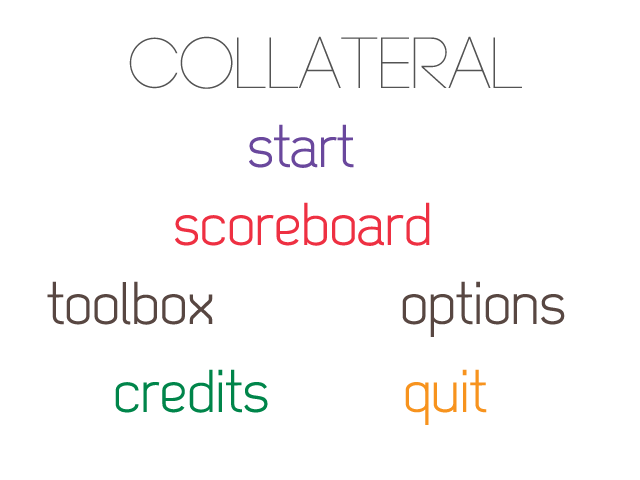
<style>
.page{position:relative;width:640px;height:480px;background:#ffffff}
.page>*{position:absolute;margin:0}
.t1{font:72px "Code-Light";letter-spacing:-0.005em;color:#535353}
.t2{font:60px "Dekar";letter-spacing:-0.005em;color:#6a489d}
.t3{font:60px "Dekar";letter-spacing:-0.005em;color:#ee3042}
.t4{font:60px "Dekar";letter-spacing:-0.005em;color:#584742}
.t5{font:60px "Dekar";letter-spacing:-0.005em;color:#00854a}
.t6{font:60px "Dekar";letter-spacing:-0.005em;color:#f7931e}
</style>
<div class="page">
<p class="t1" style="left:129px;top:36px;width:393px;height:53px">Collateral</p>
<p class="t2" style="left:249px;top:124px;width:105px;height:44px">start</p>
<p class="t3" style="left:175px;top:202px;width:255px;height:44px">scoreboard</p>
<p class="t4" style="left:47px;top:281px;width:166px;height:44px">toolbox</p>
<p class="t4" style="left:402px;top:281px;width:163px;height:56px">options</p>
<p class="t5" style="left:115px;top:369px;width:153px;height:44px">credits</p>
<p class="t6" style="left:405px;top:369px;width:82px;height:56px">quit</p>
</div>
